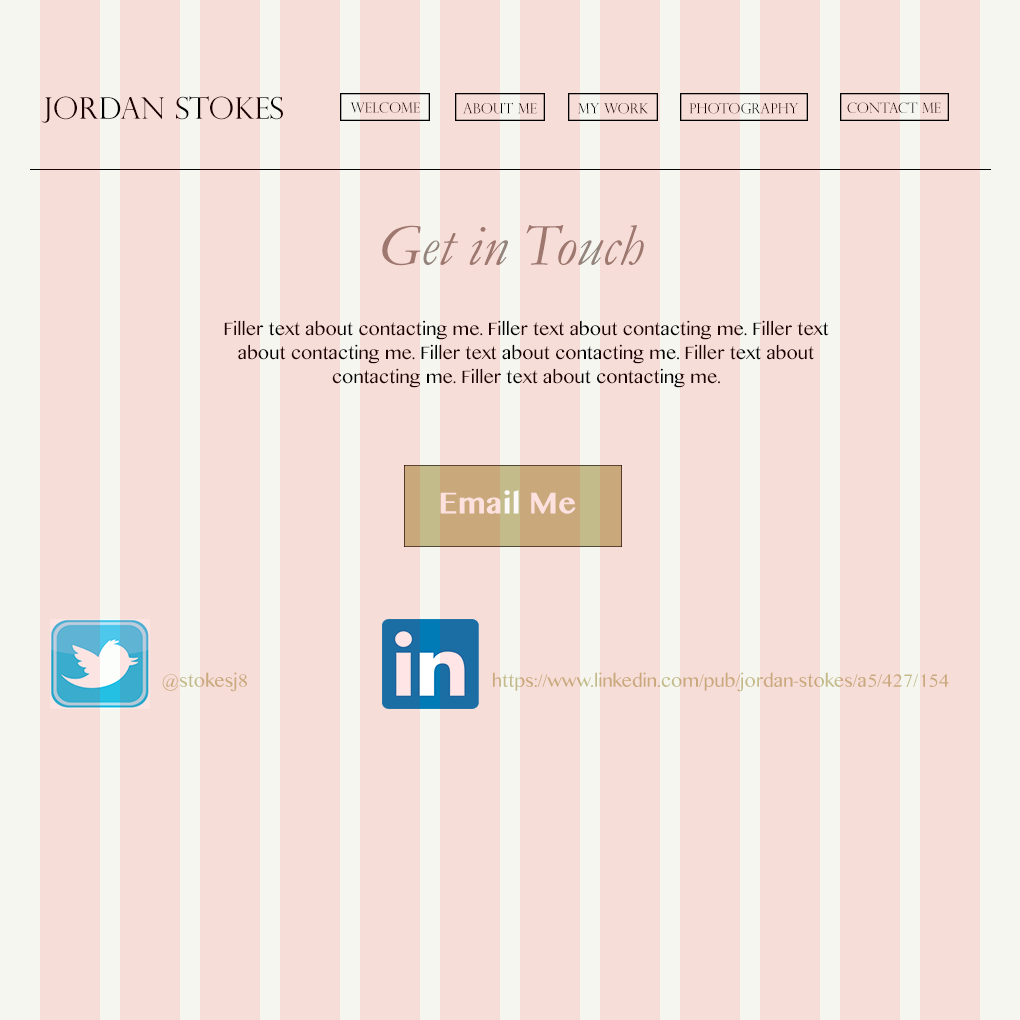
<style>
.page{position:relative;width:1020px;height:1020px;background:#f7ddd8}
.page>*{position:absolute;margin:0}
.t1{font:30px "PerpetuaTitlingMT-Light";color:#1a0000}
.t2{font:14px "PerpetuaTitlingMT-Light";color:#1a0000}
.t3{font:14px "PerpetuaTitlingMT-Light"}
.t4{font:60px "Garamond-Italic";color:#93857c}
.t5{font:18px/24px "TamilMN";color:#1e0404}
.t6{font:30px "TamilMN-Bold";color:#fce1df}
.t7{font:18px "TamilMN";color:#c3bc8a}
</style>
<div class="page">
<p class="t1" style="left:41px;top:96px;width:242px;height:27px">Jordan Stokes</p>
<p class="t2" style="left:350px;top:102px;width:70px;height:11px">Welcome</p>
<p class="t3" style="left:463px;top:102px;width:74px;height:12px">About me</p>
<p class="t2" style="left:689px;top:102px;width:110px;height:12px">photography</p>
<p class="t2" style="left:847px;top:102px;width:94px;height:11px">contact me</p>
<p class="t3" style="left:578px;top:103px;width:71px;height:11px">My work</p>
<p class="t4" style="left:382px;top:225px;width:262px;height:41px">Get in Touch</p>
<p class="t5" style="left:224px;top:320px;width:605px;height:68px;text-align:center">Filler text about contacting me. Filler text about contacting me. Filler text about contacting me. Filler text about contacting me. Filler text about contacting me. Filler text about contacting me.</p>
<p class="t6" style="left:440px;top:490px;width:136px;height:24px">Email Me</p>
<p class="t7" style="left:162px;top:672px;width:85px;height:20px">@stokesj8</p>
<p class="t7" style="left:493px;top:672px;width:456px;height:20px">https://www.linkedin.com/pub/jordan-stokes/a5/427/154</p>
</div>
